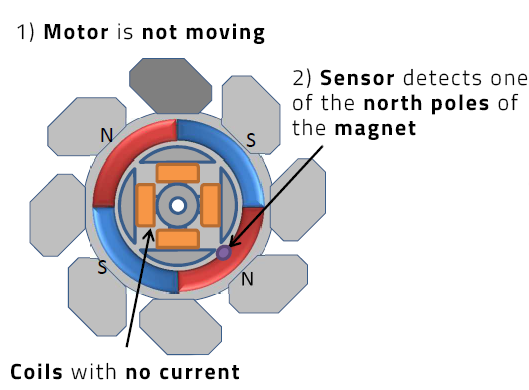
<style>
.page{position:relative;width:529px;height:390px;background:#ffffff}
.page>*{position:absolute;margin:0}
.t1{font:22px "TitilliumWeb-Bold";letter-spacing:0.08em;color:#000000}
.t2{font:22px "TitilliumWeb-Light";letter-spacing:0.08em;color:#000000}
.t3{font:22px/25px "TitilliumWeb-Light";letter-spacing:0.08em;color:#000000}
.t4{font:22px/25px "TitilliumWeb-Bold";letter-spacing:0.08em;color:#000000}
</style>
<div class="page">
<p class="t1" style="left:17px;top:22px;width:248px;height:22px"><span class="t2">1) </span>Motor <span class="t2">is </span>not moving</p>
<p class="t3" style="left:292px;top:68px;width:236px;height:72px">2) <span class="t4">Sensor </span>detects one <br>of the <span class="t4">north poles </span>of<br>the <span class="t4">magnet</span></p>
<p class="t1" style="left:11px;top:362px;width:228px;height:18px">Coils <span class="t2">with </span>no current</p>
</div>
